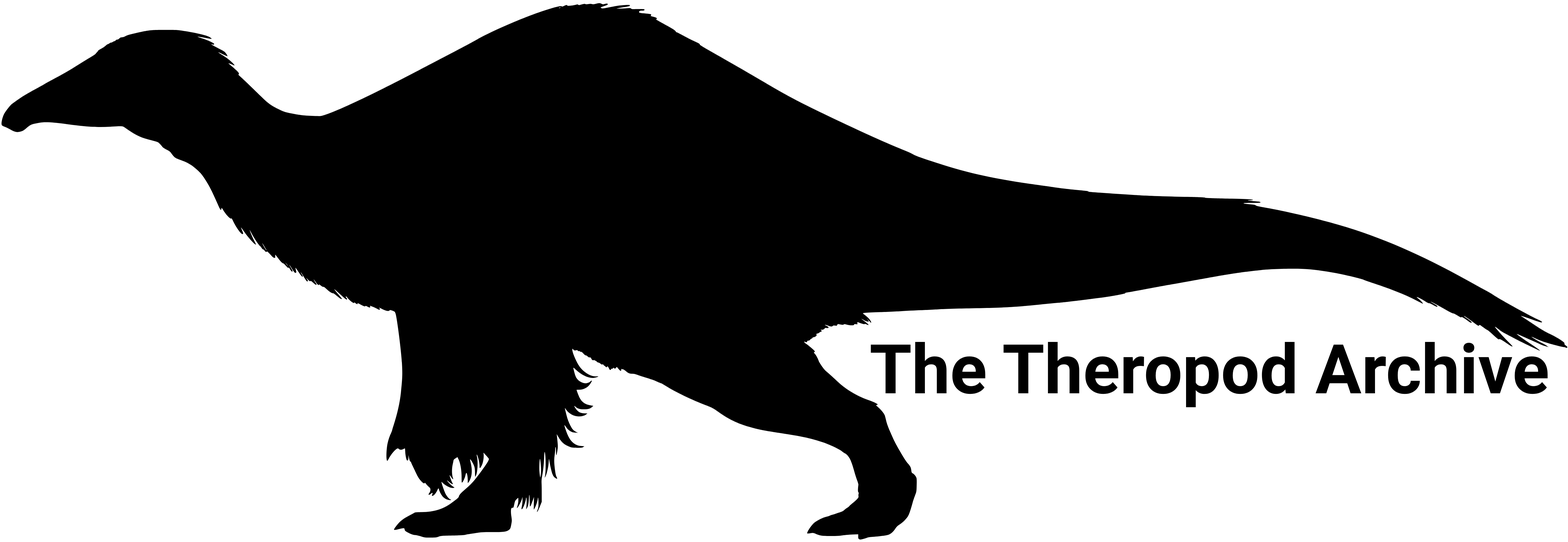
<style>
.page{position:relative;width:1568px;height:542px;background:#ffffff}
.page>*{position:absolute;margin:0}
.t1{font:68.5px "Roboto-Bold";color:#000000}
</style>
<div class="page">
<p class="t1" style="left:871px;top:342px;width:677px;height:65px">The Theropod Archive</p>
</div>
